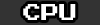
<style>
.page{position:relative;width:100px;height:25px;background:#333333}
.page>*{position:absolute;margin:0}
.t1{font:18px "PressStart2P";color:#ffffff}
</style>
<div class="page">
<p class="t1" style="left:23px;top:4px;width:53px;height:16px">CPU</p>
</div>
